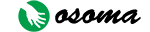
<style>
.page{position:relative;width:150px;height:32px;background:#ffffff}
.page>*{position:absolute;margin:0}
.t1{font:36px "BrushScriptStd";color:#000000}
</style>
<div class="page">
<p class="t1" style="left:55px;top:8px;width:86px;height:16px">osoma</p>
</div>
